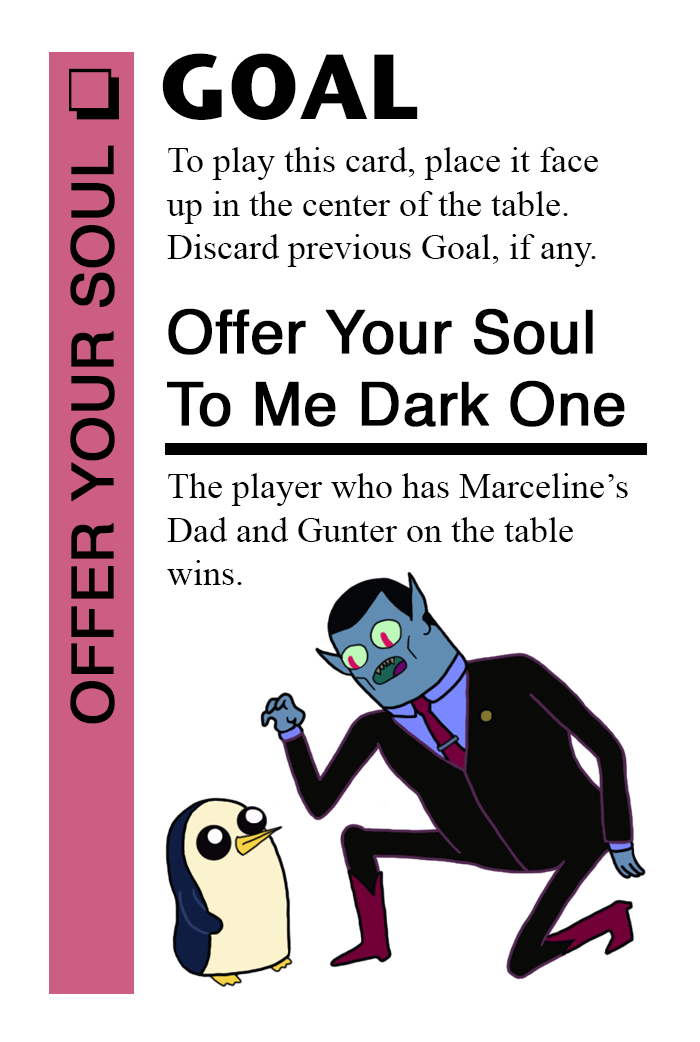
<style>
.page{position:relative;width:700px;height:1042px;background:#ffffff}
.page>*{position:absolute;margin:0}
.t1{font:92px "StoneSansITC-Bold";color:#000000}
.t2{font:72px "MS-Gothic";color:#000000}
.t3{font:58px "Helvetica";color:#000000;font-weight:bold}
.t4{font:36px "TimesNewRomanPSMT";color:#000000}
.t5{font:60px "Helvetica";color:#000000;font-weight:bold}
</style>
<div class="page">
<p class="t1" style="left:162px;top:53px;width:256px;height:67px">GOAL</p>
<p class="t2" style="left:69px;top:68px;width:50px;height:52px">❏</p>
<p class="t3" style="left:70px;top:145px;width:45px;height:579px;rotate:-90deg">OFFER YOUR SOUL</p>
<p class="t4" style="left:167px;top:147px;width:431px;height:120px">To play this card, place it face<br>up in the center of the table.<br>Discard previous Goal, if any.</p>
<p class="t5" style="left:167px;top:308px;width:458px;height:119px">Offer Your Soul<br>To Me Dark One</p>
<p class="t4" style="left:167px;top:473px;width:461px;height:112px">The player who has Marceline’s<br>Dad and Gunter on the table <br>wins.</p>
</div>
